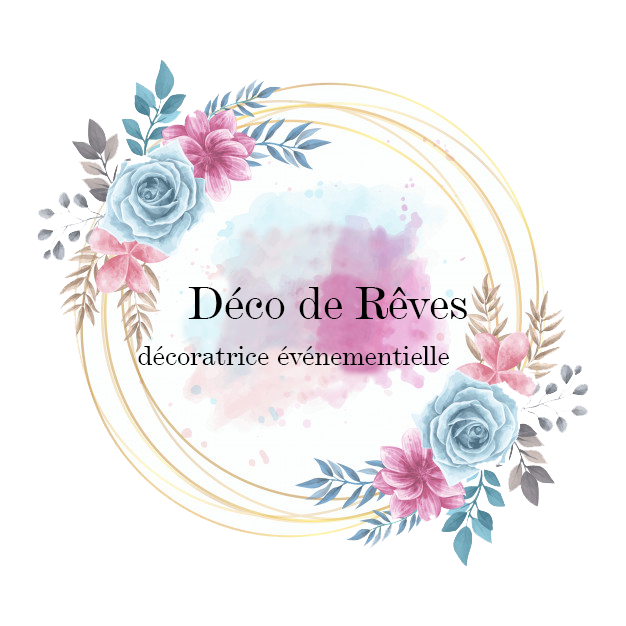
<style>
.page{position:relative;width:626px;height:626px;background:#ffffff}
.page>*{position:absolute;margin:0}
.t1{font:48px "DeVinneBT-Text";color:#000000}
.t2{font:29.3px "DeVinneBT-Text";color:#000000}
</style>
<div class="page">
<p class="t1" style="left:188px;top:287px;width:279px;height:32px">Déco de Rêves</p>
<p class="t2" style="left:138px;top:346px;width:311px;height:19px">décoratrice événementielle</p>
</div>
